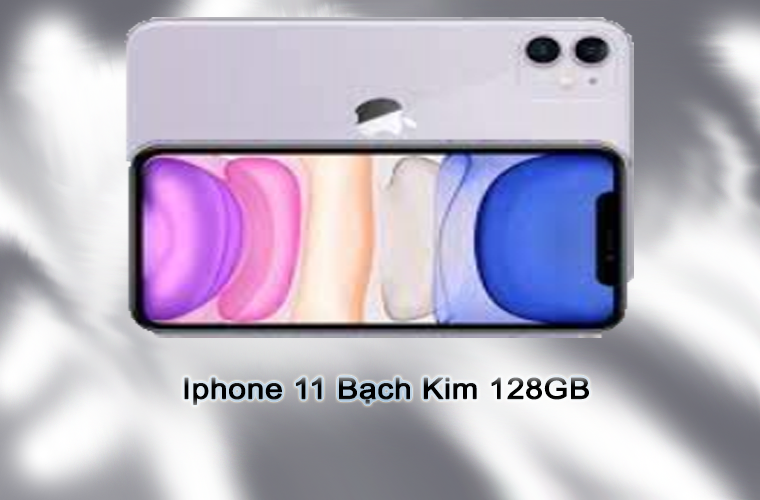
<style>
.page{position:relative;width:760px;height:500px}
.page>*{position:absolute;margin:0}
.t1{font:28.7px "ArialMT";color:#000000;font-weight:bold;scale:1.1 1}
</style>
<div class="page">
<p class="t1" style="left:184px;top:377px;width:405px;height:28px">Iphone 11 Bạch Kim 128GB</p>
</div>
